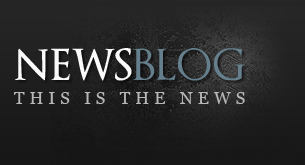
<style>
.page{position:relative;width:305px;height:165px}
.page>*{position:absolute;margin:0}
.t1{font:42px "OptimusPrincepsSemiBold";color:#fafafa}
.t2{font:42px "OptimusPrinceps";color:#657f8c}
.t3{font:17px "Georgia";letter-spacing:0.3em;color:#b7b7b7}
</style>
<div class="page">
<p class="t1" style="left:15px;top:48px;width:230px;height:33px">NEWS<span class="t2">BLOG</span></p>
<p class="t3" style="left:14px;top:92px;width:231px;height:12px">THIS IS THE NEWS</p>
</div>
